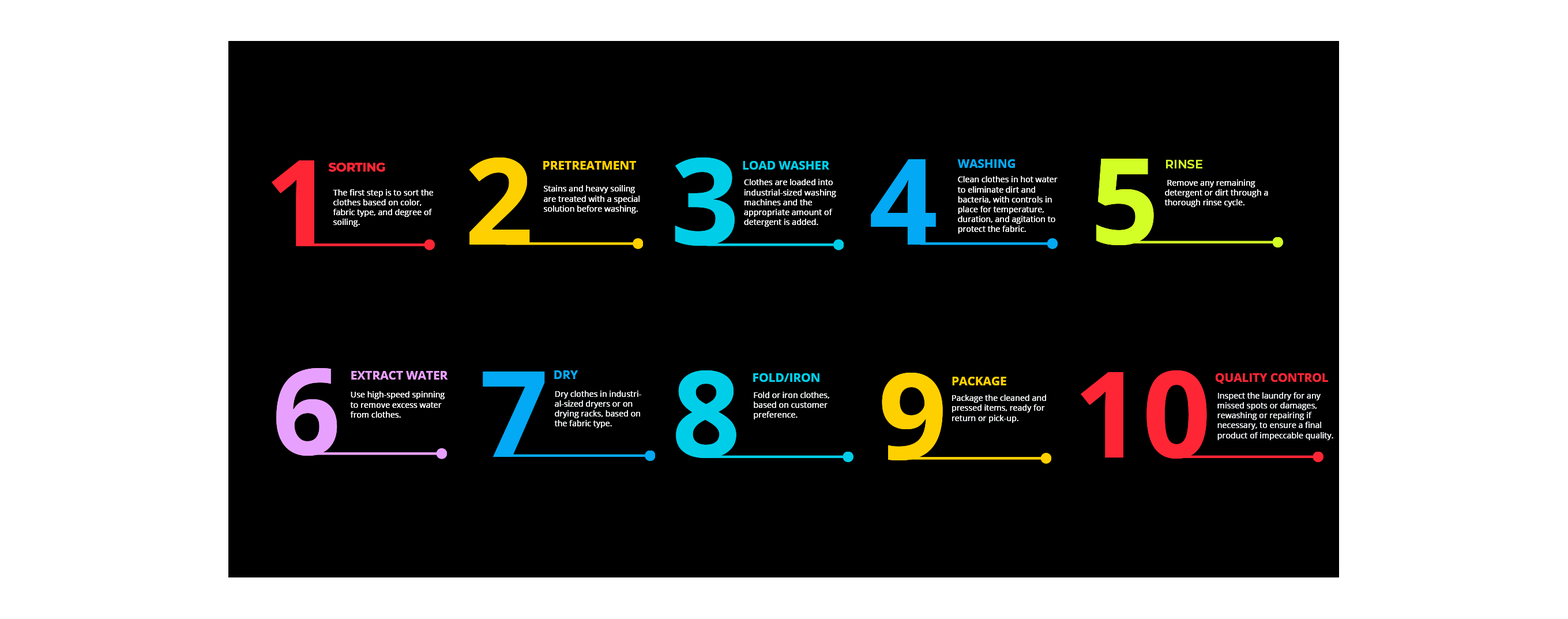
<style>
.page{position:relative;width:1568px;height:619px;background:#000000}
.page>*{position:absolute;margin:0}
.t1{font:120.1px "OpenSans-Bold";color:#fe2635}
.t2{font:120.1px "OpenSans-Bold";color:#ffd000}
.t3{font:12px "OpenSans-Bold";color:#ffd000;text-transform:uppercase}
.t4{font:120.1px "OpenSans-Bold";color:#00cee8}
.t5{font:12px "OpenSans-Bold";color:#00cee8;text-transform:uppercase}
.t6{font:120.1px "OpenSans-Bold";color:#03a9f4}
.t7{font:12px "OpenSans-Bold";color:#03a9f4;text-transform:uppercase}
.t8{font:120.1px "OpenSans-Bold";color:#d3fe26}
.t9{font:12px "Montserrat-SemiBold";color:#d3fe26;text-transform:uppercase}
.t10{font:12px "MontserratRoman-Bold";color:#fe2635;text-transform:uppercase}
.t11{font:8.2px "OpenSans";color:#ffffff}
.t12{font:120.1px "OpenSans-Bold";color:#e8a0ff}
.t13{font:12px "OpenSans-Bold";color:#e8a0ff;text-transform:uppercase}
.t14{font:12px "OpenSans-Bold";color:#fe2635;text-transform:uppercase}
.t15{font:8.2px "OpenSans";color:#f7f9fb}
.t16{font:8.2px "OpenSans";color:#f8fafb}
.t17{font:8.2px "OpenSans";color:#f5f7f9}
.t18{font:8.2px "OpenSans";color:#f1f5f7}
</style>
<div class="page">
<p class="t1" style="left:272px;top:160px;width:42px;height:86px">1</p>
<p class="t2" style="left:469px;top:157px;width:61px;height:88px">2</p>
<p class="t3" style="left:543px;top:161px;width:93px;height:9px">Pretreatment</p>
<p class="t4" style="left:675px;top:157px;width:60px;height:89px">3</p>
<p class="t5" style="left:743px;top:161px;width:86px;height:9px">load washer</p>
<p class="t6" style="left:871px;top:159px;width:65px;height:86px">4</p>
<p class="t7" style="left:957px;top:159px;width:58px;height:9px">Washing</p>
<p class="t8" style="left:1096px;top:159px;width:58px;height:86px">5</p>
<p class="t9" style="left:1166px;top:160px;width:36px;height:8px">Rinse</p>
<p class="t10" style="left:329px;top:163px;width:56px;height:9px">Sorting</p>
<p class="t11" style="left:544px;top:185px;width:96px;height:28px">Stains and heavy soiling are treated with a special solution before washing.</p>
<p class="t11" style="left:744px;top:179px;width:92px;height:48px">Clothes are loaded into industrial-sized washing machines and the appropriate amount of detergent is added.</p>
<p class="t11" style="left:957px;top:176px;width:101px;height:58px">Clean clothes in hot water to eliminate dirt and bacteria, with controls in place for temperature, duration, and agitation to protect the fabric.</p>
<p class="t11" style="left:1164px;top:179px;width:104px;height:28px">Remove any remaining detergent or dirt through a thorough rinse cycle.</p>
<p class="t11" style="left:333px;top:189px;width:100px;height:38px">The first step is to sort the clothes based on color, fabric type, and degree of soiling.</p>
<p class="t12" style="left:276px;top:368px;width:61px;height:88px">6</p>
<p class="t13" style="left:351px;top:371px;width:97px;height:8px">Extract Water</p>
<p class="t6" style="left:483px;top:371px;width:62px;height:86px">7</p>
<p class="t7" style="left:554px;top:370px;width:24px;height:9px">Dry</p>
<p class="t4" style="left:676px;top:370px;width:60px;height:88px">8</p>
<p class="t5" style="left:753px;top:373px;width:66px;height:9px">Fold/Iron</p>
<p class="t2" style="left:882px;top:373px;width:61px;height:87px">9</p>
<p class="t3" style="left:952px;top:377px;width:54px;height:8px">Package</p>
<p class="t1" style="left:1081px;top:370px;width:126px;height:88px">10</p>
<p class="t14" style="left:1216px;top:373px;width:112px;height:10px">Quality Control</p>
<p class="t11" style="left:350px;top:391px;width:95px;height:27px">Use high-speed spinning to remove excess water from clothes.</p>
<p class="t15" style="left:554px;top:390px;width:87px;height:38px">Dry clothes in industrial-sized dryers or on drying racks, based on <br>the fabric type.</p>
<p class="t16" style="left:754px;top:392px;width:75px;height:27px">Fold or iron clothes, based on customer preference.</p>
<p class="t17" style="left:952px;top:394px;width:94px;height:29px">Package the cleaned and pressed items, ready for return or pick-up.</p>
<p class="t18" style="left:1217px;top:392px;width:116px;height:48px">Inspect the laundry for any missed spots or damages, rewashing or repairing if necessary, to ensure a final product of impeccable quality.</p>
</div>
